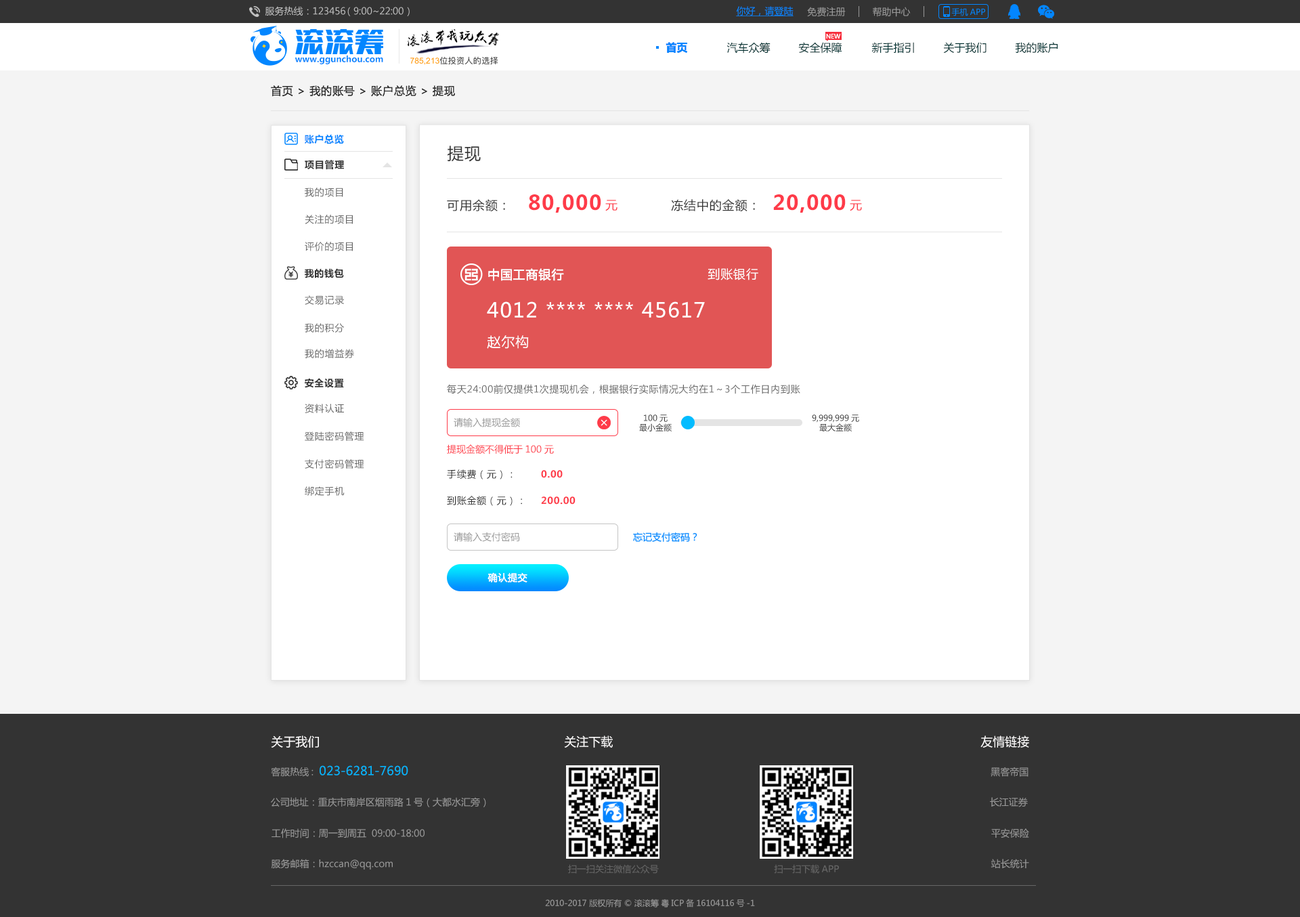
<style>
.page{position:relative;width:1300px;height:917px;background:#ffffff}
.page>*{position:absolute;margin:0}
.t1{font:9.5px "MicrosoftYaHei";color:#c4c4c4}
.t2{font:9.5px "MicrosoftYaHei";color:#0386ff;text-decoration:underline}
.t3{font:9.5px "MicrosoftYaHei";color:#999999}
.t4{font:8.1px "MicrosoftYaHei";color:#0386ff}
.t5{font:10.8px "MicrosoftYaHei-Bold";color:#0386ff}
.t6{font:10.8px "MicrosoftYaHei";color:#033333}
.t7{font:6.1px "MicrosoftYaHei";color:#ffffff}
.t8{font:8.5px "MicrosoftYaHei-Bold";color:#0386ff}
.t9{font:10.8px "MicrosoftYaHei";letter-spacing:0.05em;color:#333333}
.t10{font:9.5px "MicrosoftYaHei-Bold";letter-spacing:0.05em;color:#0386ff}
.t11{font:16.3px "MicrosoftYaHei";letter-spacing:0.05em;color:#333333}
.t12{font:9.5px "MicrosoftYaHei-Bold";letter-spacing:0.05em;color:#333333}
.t13{font:9.5px "MicrosoftYaHei";letter-spacing:0.05em;color:#666666}
.t14{font:20.3px "MicrosoftYaHei-Bold";letter-spacing:0.05em;color:#fe3b49}
.t15{font:12.2px "MicrosoftYaHei";letter-spacing:0.05em;color:#333333}
.t16{font:12.2px "MicrosoftYaHei";letter-spacing:0.05em;color:#fe3b49}
.t17{font:12.2px "MicrosoftYaHei";letter-spacing:0.05em;color:#fefefe}
.t18{font:12.2px "MicrosoftYaHei";letter-spacing:0.05em;color:#ffffff}
.t19{font:20.3px "MicrosoftYaHei";letter-spacing:0.05em;color:#ffffff}
.t20{font:13.5px "MicrosoftYaHei";letter-spacing:0.05em;color:#ffffff}
.t21{font:8.1px/9.5px "MicrosoftYaHei";color:#333333}
.t22{font:9.5px "MicrosoftYaHei";color:#fe3b49}
.t23{font:9.5px "MicrosoftYaHei";letter-spacing:0.05em;color:#333333}
.t24{font:9.5px "MicrosoftYaHei-Bold";letter-spacing:0.05em;color:#fe3b49}
.t25{font:9.5px "MicrosoftYaHei";color:#0386ff}
.t26{font:9.5px "MicrosoftYaHei";letter-spacing:0.05em;color:#fefefe}
.t27{font:12.2px "MicrosoftYaHei";color:#fffefe}
.t28{font:12.2px "MicrosoftYaHei";color:#03b6ff}
.t29{font:9.1px "MicrosoftYaHei";color:#666666}
.t30{font:8.1px "MicrosoftYaHei";color:#999999}
</style>
<div class="page">
<p class="t1" style="left:265px;top:6px;width:145px;height:10px">服务热线：123456 （9:00~22:00）</p>
<p class="t2" style="left:736px;top:6px;width:58px;height:10px">你好，请登陆</p>
<p class="t3" style="left:807px;top:7px;width:39px;height:10px">免费注册</p>
<p class="t3" style="left:873px;top:7px;width:38px;height:10px">帮助中心</p>
<p class="t4" style="left:952px;top:8px;width:33px;height:8px">手机APP</p>
<p class="t5" style="left:666px;top:42px;width:22px;height:12px">首页</p>
<p class="t6" style="left:727px;top:42px;width:44px;height:12px">汽车众筹</p>
<p class="t6" style="left:798px;top:42px;width:45px;height:12px">安全保障</p>
<p class="t7" style="left:826px;top:33px;width:15px;height:6px">NEW</p>
<p class="t6" style="left:872px;top:42px;width:42px;height:12px">新手指引</p>
<p class="t6" style="left:943px;top:42px;width:44px;height:12px">关于我们</p>
<p class="t6" style="left:1015px;top:42px;width:43px;height:12px">我的账户</p>
<p class="t8" style="left:295px;top:55px;width:88px;height:9px">www.ggunchou.com</p>
<p class="t9" style="left:271px;top:85px;width:184px;height:12px">首页 &gt; 我的账号 &gt; 账户总览 &gt; 提现</p>
<p class="t10" style="left:305px;top:134px;width:39px;height:10px">账户总览</p>
<p class="t11" style="left:448px;top:146px;width:33px;height:16px">提现</p>
<p class="t12" style="left:305px;top:160px;width:39px;height:9px">项目管理</p>
<p class="t13" style="left:305px;top:188px;width:38px;height:9px">我的项目</p>
<p class="t14" style="left:529px;top:194px;width:72px;height:19px">80,000</p>
<p class="t14" style="left:773px;top:194px;width:73px;height:19px">20,000</p>
<p class="t15" style="left:447px;top:199px;width:58px;height:13px">可用余额：</p>
<p class="t16" style="left:605px;top:200px;width:13px;height:11px">元</p>
<p class="t15" style="left:671px;top:199px;width:84px;height:13px">冻结中的金额：</p>
<p class="t16" style="left:850px;top:200px;width:12px;height:11px">元</p>
<p class="t13" style="left:305px;top:215px;width:48px;height:9px">关注的项目</p>
<p class="t13" style="left:305px;top:242px;width:48px;height:9px">评价的项目</p>
<p class="t12" style="left:305px;top:268px;width:39px;height:10px">我的钱包</p>
<p class="t17" style="left:488px;top:268px;width:76px;height:13px">中国工商银行</p>
<p class="t18" style="left:708px;top:268px;width:51px;height:12px">到账银行</p>
<p class="t13" style="left:305px;top:295px;width:39px;height:10px">交易记录</p>
<p class="t19" style="left:487px;top:301px;width:218px;height:17px">4012 **** **** 45617</p>
<p class="t13" style="left:305px;top:323px;width:39px;height:10px">我的积分</p>
<p class="t20" style="left:487px;top:335px;width:42px;height:14px">赵尔构</p>
<p class="t13" style="left:305px;top:349px;width:49px;height:9px">我的增益券</p>
<p class="t12" style="left:305px;top:378px;width:39px;height:10px">安全设置</p>
<p class="t13" style="left:447px;top:384px;width:354px;height:10px">每天24:00前仅提供1次提现机会，根据银行实际情况大约在1～3个工作日内到账</p>
<p class="t13" style="left:305px;top:404px;width:39px;height:9px">资料认证</p>
<p class="t3" style="left:454px;top:418px;width:66px;height:9px">请输入提现金额</p>
<p class="t21" style="left:639px;top:414px;width:33px;height:18px;text-align:center">100元<br>最小金额</p>
<p class="t21" style="left:812px;top:414px;width:47px;height:18px;text-align:center">9,999,999元<br>最大金额</p>
<p class="t13" style="left:305px;top:431px;width:59px;height:10px">登陆密码管理</p>
<p class="t22" style="left:447px;top:444px;width:107px;height:10px">提现金额不得低于100元</p>
<p class="t13" style="left:305px;top:459px;width:59px;height:10px">支付密码管理</p>
<p class="t23" style="left:447px;top:469px;width:66px;height:11px">手续费（元）：</p>
<p class="t24" style="left:541px;top:470px;width:22px;height:8px">0.00</p>
<p class="t13" style="left:305px;top:486px;width:40px;height:10px">绑定手机</p>
<p class="t23" style="left:447px;top:496px;width:75px;height:10px">到账金额（元）：</p>
<p class="t24" style="left:541px;top:496px;width:35px;height:9px">200.00</p>
<p class="t3" style="left:454px;top:532px;width:66px;height:10px">请输入支付密码</p>
<p class="t25" style="left:633px;top:532px;width:65px;height:10px">忘记支付密码？</p>
<p class="t26" style="left:488px;top:572px;width:40px;height:10px">确认提交</p>
<p class="t27" style="left:271px;top:736px;width:48px;height:12px">关于我们</p>
<p class="t27" style="left:564px;top:736px;width:49px;height:12px">关注下载</p>
<p class="t27" style="left:981px;top:736px;width:48px;height:12px">友情链接</p>
<p class="t28" style="left:271px;top:765px;width:137px;height:12px"><span class="t3">客服热线:  </span>023-6281-7690</p>
<p class="t3" style="left:991px;top:767px;width:38px;height:10px">黑客帝国</p>
<p class="t3" style="left:271px;top:797px;width:215px;height:10px">公司地址：重庆市南岸区烟雨路1号（大都水汇旁）</p>
<p class="t3" style="left:990px;top:797px;width:38px;height:10px">长江证券</p>
<p class="t3" style="left:272px;top:828px;width:153px;height:10px">工作时间：周一到周五  09:00-18:00</p>
<p class="t3" style="left:992px;top:828px;width:37px;height:10px">平安保险</p>
<p class="t3" style="left:271px;top:859px;width:122px;height:11px">服务邮箱：hzccan@qq.com</p>
<p class="t29" style="left:568px;top:864px;width:91px;height:10px">扫一扫关注微信公众号</p>
<p class="t29" style="left:774px;top:864px;width:65px;height:10px">扫一扫下载APP</p>
<p class="t3" style="left:991px;top:859px;width:38px;height:9px">站长统计</p>
<p class="t30" style="left:545px;top:899px;width:210px;height:9px">2010-2017 版权所有 © 滚滚筹 粤ICP备16104116号-1</p>
</div>
